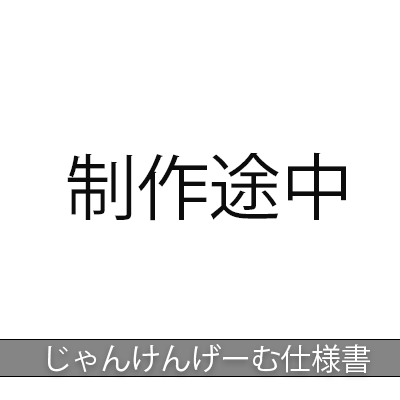
<style>
.page{position:relative;width:400px;height:400px;background:#ffffff}
.page>*{position:absolute;margin:0}
.t1{font:72px "KozGoPr6N-Regular";color:#0c0c0c}
.t2{font:30px "KozGoPr6N-Regular";color:#ffffff}
</style>
<div class="page">
<p class="t1" style="left:67px;top:152px;width:279px;height:69px">制作途中</p>
<p class="t2" style="left:48px;top:344px;width:322px;height:29px">じゃんけんげーむ仕様書</p>
</div>
